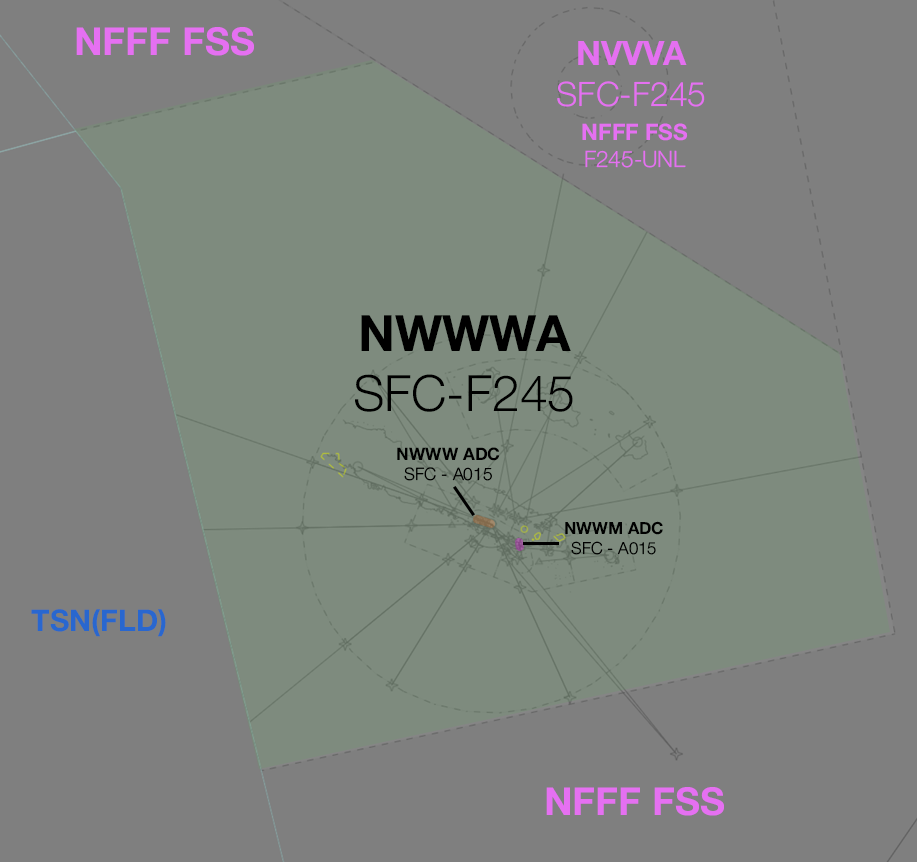
<style>
.page{position:relative;width:917px;height:862px;background:#7f7f7f}
.page>*{position:absolute;margin:0}
.t1{font:38.6px "HelveticaNeue-Bold";color:#e570f1}
.t2{font:33.7px "HelveticaNeue-Light";color:#e570f1}
.t3{font:33.7px "HelveticaNeue-Bold";color:#e570f1}
.t4{font:22.7px "HelveticaNeue-Bold";color:#e570f1}
.t5{font:22.7px "HelveticaNeue-Light";color:#e570f1}
.t6{font:50.1px "HelveticaNeue-Light";color:#000000}
.t7{font:50.1px "HelveticaNeue-Bold";color:#000000}
.t8{font:17.2px "HelveticaNeue-Light";color:#000000}
.t9{font:17.2px "HelveticaNeue-Bold";color:#000000}
.t10{font:16.7px "HelveticaNeue-Light";color:#000000}
.t11{font:16.7px "HelveticaNeue-Bold";color:#000000}
.t12{font:29.9px "HelveticaNeue-Bold";color:#2967cf}
</style>
<div class="page">
<p class="t1" style="left:76px;top:27px;width:178px;height:29px">NFFF FSS</p>
<p class="t2" style="left:557px;top:41px;width:148px;height:66px;text-align:center"><span class="t3">NVVVA<br></span>SFC-F245</p>
<p class="t4" style="left:582px;top:123px;width:106px;height:45px;text-align:center">NFFF FSS<br><span class="t5">F245-UNL</span></p>
<p class="t6" style="left:355px;top:315px;width:218px;height:97px;text-align:center"><span class="t7">NWWWA<br></span>SFC-F245</p>
<p class="t8" style="left:397px;top:447px;width:103px;height:34px;text-align:center"><span class="t9">NWWW ADC<br></span>SFC - A015</p>
<p class="t10" style="left:565px;top:521px;width:98px;height:34px;text-align:center"><span class="t11">NWWM ADC<br></span>SFC - A015</p>
<p class="t12" style="left:31px;top:609px;width:135px;height:28px">TSN(FLD)</p>
<p class="t1" style="left:546px;top:787px;width:178px;height:29px">NFFF FSS</p>
</div>
